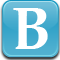
<style>
.page{position:relative;width:60px;height:60px}
.page>*{position:absolute;margin:0}
.t1{font:60px "Palatino-Bold";color:#ffffff}
</style>
<div class="page">
<p class="t1" style="left:13px;top:8px;width:35px;height:41px">B</p>
</div>
